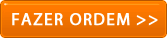
<style>
.page{position:relative;width:167px;height:38px}
.page>*{position:absolute;margin:0}
.t1{font:17px "MyriadPro-Regular";letter-spacing:0.06em;color:#ffffff;font-weight:bold}
</style>
<div class="page">
<p class="t1" style="left:12px;top:13px;width:146px;height:13px">FAZER ORDEM &gt;&gt;</p>
</div>
